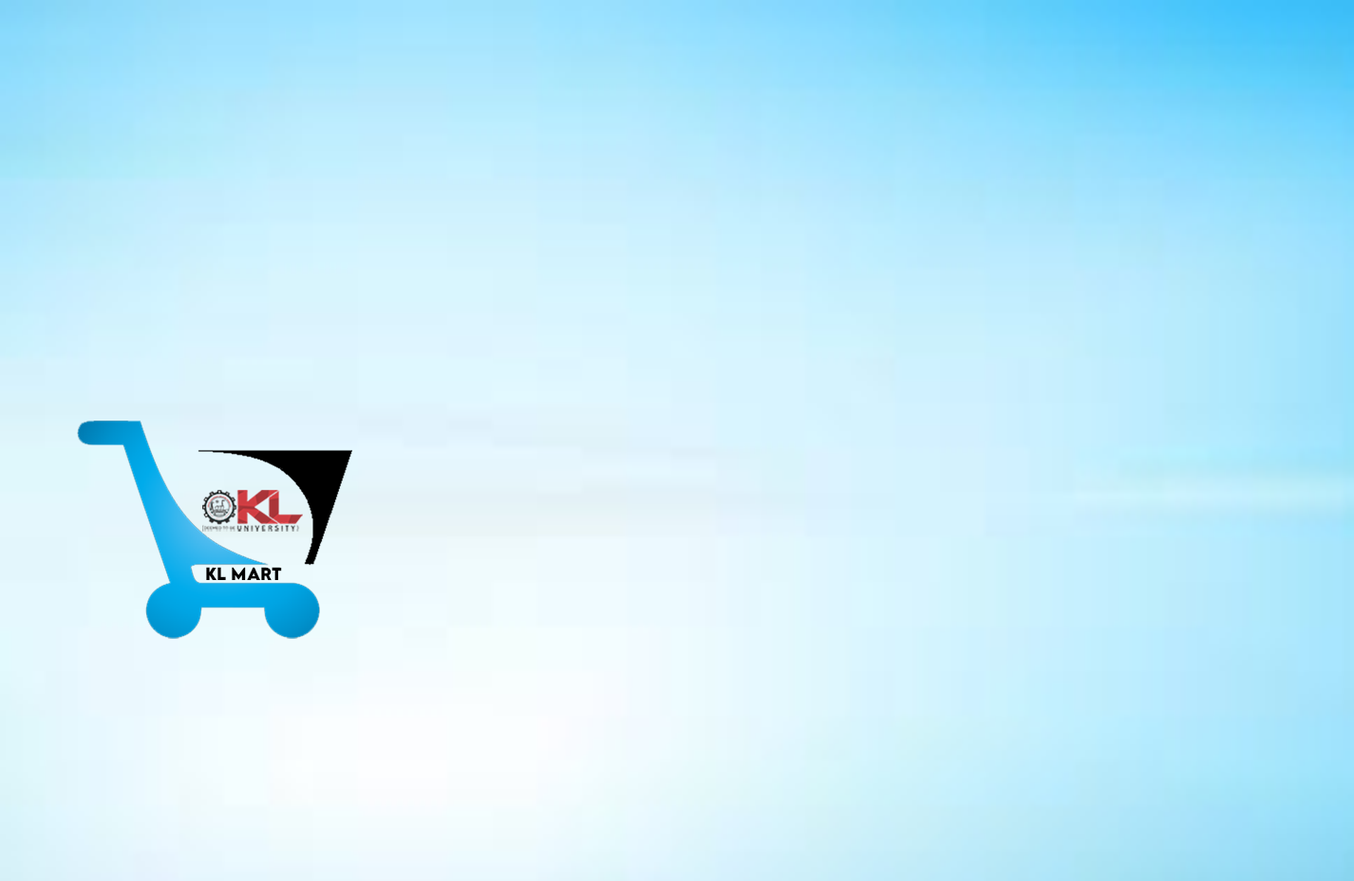
<style>
.page{position:relative;width:1354px;height:881px}
.page>*{position:absolute;margin:0}
.t1{font:15.9px "LEMONMILK-Bold";color:#000000;text-transform:uppercase}
.t2{font:15.9px "LEMONMILK-Bold";color:#000000}
</style>
<div class="page">
<p class="t1" style="left:206px;top:567px;width:76px;height:14px">kl ma<span class="t2">r</span>t</p>
</div>
